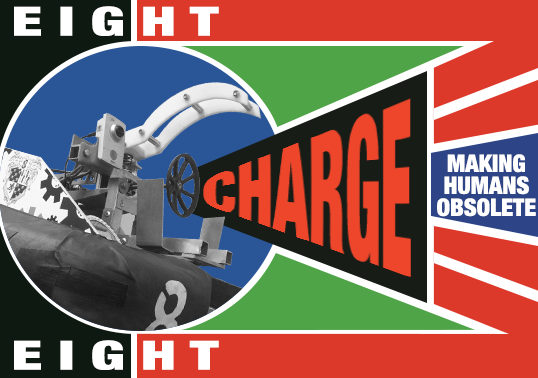
<style>
.page{position:relative;width:538px;height:378px;background:#dc392a}
.page>*{position:absolute;margin:0}
.t1{font:40px "HelveticaNeue-CondensedBlack";color:#ffffff;scale:1.54 1}
.t2{font:24px/22px "HelveticaNeue-CondensedBlack";color:#ffffff}
</style>
<div class="page">
<p class="t1" style="left:14px;top:6px;width:205px;height:30px">E I G H T</p>
<p class="t2" style="left:437px;top:154px;width:99px;height:63px;text-align:center">MAKING<br>HUMANS<br>OBSOLETE</p>
<p class="t1" style="left:14px;top:340px;width:205px;height:30px">E I G H T</p>
</div>
